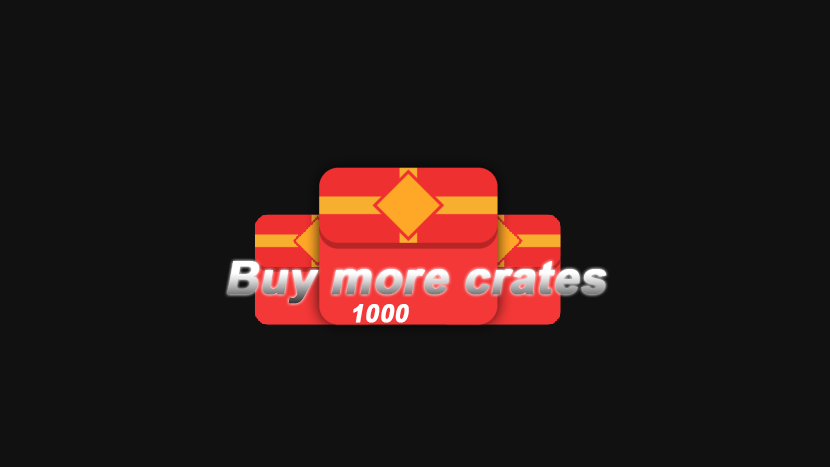
<style>
.page{position:relative;width:830px;height:467px;background:#111111}
.page>*{position:absolute;margin:0}
.t1{font:46.3px "Arial-BoldMT";font-weight:bold;font-style:italic}
.t2{font:25.2px "Arial-BoldMT";color:#ffffff;font-weight:bold;font-style:italic}
</style>
<div class="page">
<p class="t1" style="left:227px;top:261px;width:380px;height:43px">Buy more crates</p>
<p class="t2" style="left:353px;top:304px;width:56px;height:19px">1000</p>
</div>
